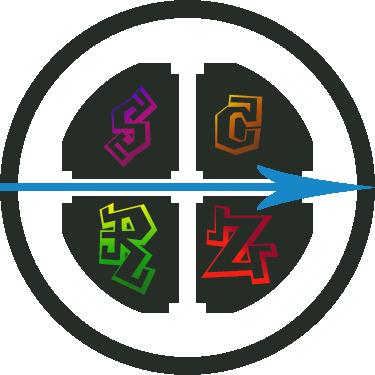
<style>
.page{position:relative;width:375px;height:375px;background:#ffffff}
.page>*{position:absolute;margin:0}
.t1{font:95.8px "GraffitiTreat-Regular"}
.t2{font:100px "GraffitiTreat-Regular"}
</style>
<div class="page">
<p class="t1" style="left:103px;top:85px;width:55px;height:83px">s</p>
<p class="t1" style="left:215px;top:94px;width:48px;height:61px">C</p>
<p class="t1" style="left:99px;top:202px;width:59px;height:93px">R</p>
<p class="t2" style="left:201px;top:205px;width:78px;height:80px">Z</p>
</div>
